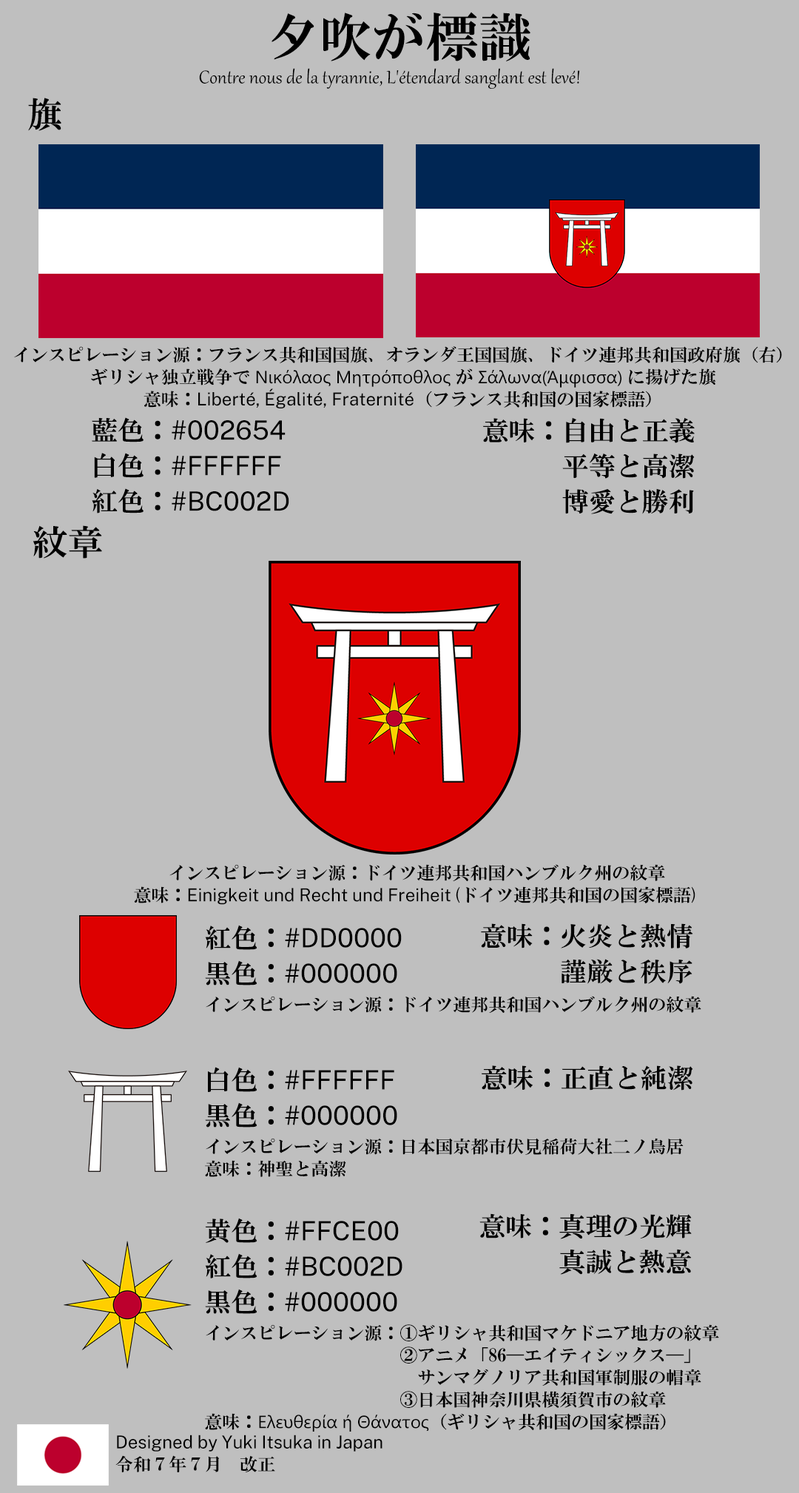
<style>
.page{position:relative;width:799px;height:1493px;background:#bfbfbf}
.page>*{position:absolute;margin:0}
.t1{font:53.3px "HGMinchoE";color:#000000}
.t2{font:22.2px "Gabriola";color:#000000}
.t3{font:35.5px "HGMinchoE";color:#000000}
.t4{font:17.8px/22.2px "HGMinchoE";color:#000000}
.t5{font:17.8px/22.2px "SegoeUI";color:#000000}
.t6{font:17.8px/22.2px "PublicSans-Regular";color:#000000}
.t7{font:26.6px/35.5px "PublicSans-Regular";color:#000000}
.t8{font:26.6px/35.5px "HGMinchoE";color:#000000}
.t9{font:17.8px/35.5px "HGMinchoE";color:#000000}
.t10{font:26.6px "HGMinchoE";color:#000000}
</style>
<div class="page">
<p class="t1" style="left:271px;top:12px;width:259px;height:49px">夕吹が標識</p>
<p class="t2" style="left:199px;top:68px;width:381px;height:21px">Contre nous de la tyrannie, L'étendard sanglant est levé!</p>
<p class="t3" style="left:28px;top:98px;width:33px;height:33px">旗</p>
<p class="t4" style="left:14px;top:346px;width:768px;height:63px;text-align:center">インスピレーション源：フランス共和国国旗、オランダ王国国旗、ドイツ連邦共和国政府旗（右）<br>ギリシャ独立戦争で<span class="t5"> Νικόλαος Μητρόποθλος </span>が<span class="t5"> Σάλωνα(Άμφισσα) </span>に揚げた旗<br>意味：<span class="t6">Liberté, Égalité, Fraternité</span>（フランス共和国の国家標語）</p>
<p class="t7" style="left:92px;top:417px;width:197px;height:96px"><span class="t8">藍色：</span>#002654<span class="t8">　<br>白色：</span>#FFFFFF<span class="t8">　<br>紅色：</span>#BC002D</p>
<p class="t8" style="left:482px;top:417px;width:213px;height:97px">意味：自由と正義<br>　　　平等と高潔<br>　　　博愛と勝利</p>
<p class="t3" style="left:33px;top:525px;width:69px;height:33px">紋章</p>
<p class="t4" style="left:134px;top:864px;width:561px;height:41px;text-align:center">インスピレーション源：ドイツ連邦共和国ハンブルク州の紋章<br>意味：<span class="t6">Einigkeit und Recht und Freiheit</span>(<span class="t9">ドイツ連邦共和国</span>の国家標語)</p>
<p class="t4" style="left:205px;top:925px;width:514px;height:506px"><span class="t8">紅色：</span><span class="t7">#DD0000<br></span><span class="t8">黒色：</span><span class="t7">#000000<br></span><span class="t9">インスピレーション源：ドイツ連邦共和国ハンブルク州の紋章<br></span><span class="t8"><br>白色：</span><span class="t7">#FFFFFF<br></span><span class="t8">黒色：</span><span class="t7">#000000<br></span>インスピレーション源：日本国京都市伏見稲荷大社二ノ鳥居<br>意味：神聖と高潔<br><span class="t8"><br>黄色：</span><span class="t7">#FFCE00<br></span><span class="t8">紅色：</span><span class="t7">#BC002D<br></span><span class="t8">黒色：</span><span class="t7">#000000<br></span>インスピレーション源：①ギリシャ共和国マケドニア地方の紋章<br>　　　　　　　　　　　②アニメ「86―エイティシックス―」<br>　　　　　　　　　　　　サンマグノリア共和国軍制服の帽章<br>　　　　　　　　　　　③日本国神奈川県横須賀市の紋章<br>意味：<span class="t5">Ελευθερία ή Θάνατος</span>（ギリシャ共和国の国家標語）</p>
<p class="t8" style="left:481px;top:923px;width:212px;height:61px">意味：火炎と熱情<br>　　　謹厳と秩序</p>
<p class="t10" style="left:481px;top:1065px;width:212px;height:25px">意味：正直と純潔</p>
<p class="t8" style="left:479px;top:1213px;width:213px;height:61px">意味：真理の光輝<br>　　　真誠と熱意</p>
<p class="t6" style="left:115px;top:1434px;width:267px;height:38px">Designed by Yuki Itsuka in Japan<br><span class="t4">令和７年７月　改正</span></p>
</div>
